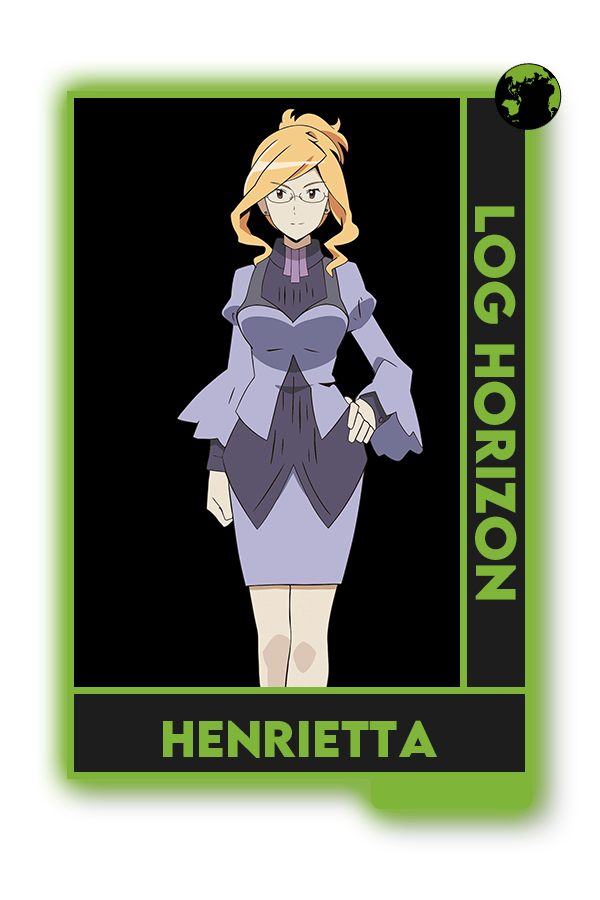
<style>
.page{position:relative;width:600px;height:900px;background:#000000}
.page>*{position:absolute;margin:0}
.t1{font:50px "LEMONMILK-Bold";color:#7fad41}
.t2{font:45.8px "LEMONMILK-Bold";color:#7fad41}
</style>
<div class="page">
<p class="t1" style="left:474px;top:206px;width:43px;height:394px;rotate:90deg">Log Horizon</p>
<p class="t2" style="left:163px;top:720px;width:274px;height:38px">Henrietta</p>
</div>
